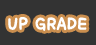
<style>
.page{position:relative;width:96px;height:45px;background:#333333}
.page>*{position:absolute;margin:0}
.t1{font:22px "KoreanCT-R";color:#ffffff}
</style>
<div class="page">
<p class="t1" style="left:8px;top:17px;width:79px;height:14px">UP GRADE</p>
</div>
